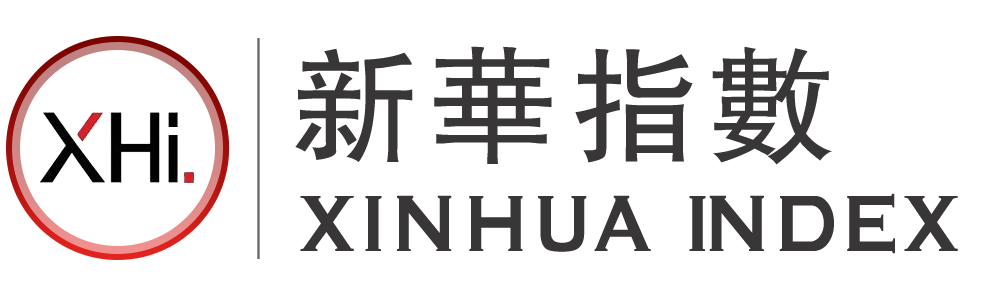
<style>
.page{position:relative;width:1000px;height:300px;background:#ffffff}
.page>*{position:absolute;margin:0}
.t1{font:126.7px "FZHTFW--GB1-0";letter-spacing:0.1em;color:#383637}
.t2{font:88.8px "GraverplateBold";color:#383637;scale:0.86 1}
.t3{font:88.8px "GraverplateBold";letter-spacing:-0.15em;color:#383637;scale:0.86 1}
</style>
<div class="page">
<p class="t1" style="left:295px;top:46px;width:537px;height:119px">新华指数</p>
<p class="t2" style="left:300px;top:193px;width:658px;height:61px">XINHU<span class="t3">A I</span>NDEX</p>
</div>
